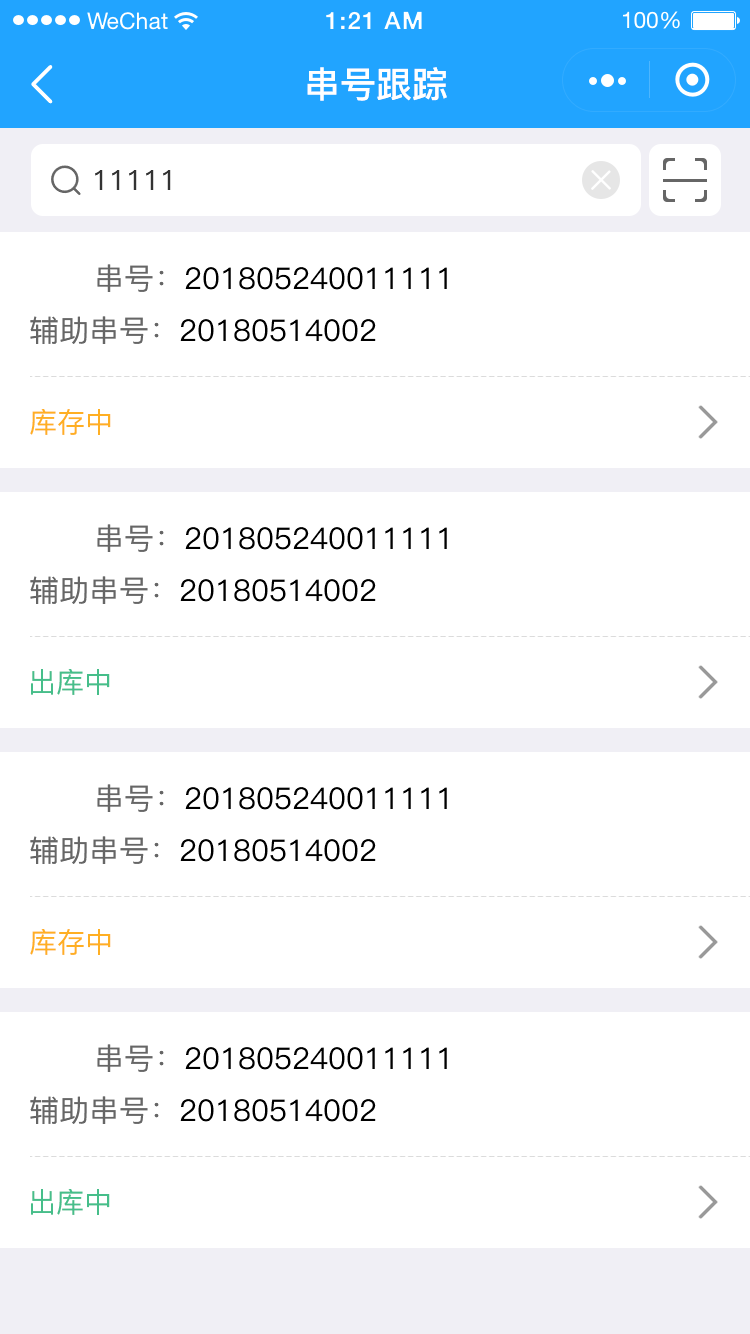
<style>
.page{position:relative;width:750px;height:1334px;background:#ffffff}
.page>*{position:absolute;margin:0}
.t1{font:36px "PingFang-SC-Bold";color:#ffffff}
.t2{font:28px "PingFang-SC-Medium";color:#333333}
.t3{font:30px "PingFang-SC-Medium";color:#000000}
.t4{font:30px "PingFang-SC-Medium";color:#666666}
.t5{font:28px "PingFang-SC-Medium";color:#ffaf23}
.t6{font:28px "PingFang-SC-Medium";color:#46be8a}
</style>
<div class="page">
<p class="t1" style="left:307px;top:67px;width:140px;height:34px">串号跟踪</p>
<p class="t2" style="left:95px;top:170px;width:76px;height:20px">11111</p>
<p class="t3" style="left:97px;top:264px;width:350px;height:28px"><span class="t4">串号：</span>201805240011111</p>
<p class="t3" style="left:30px;top:316px;width:346px;height:28px"><span class="t4">辅助串号：</span>20180514002</p>
<p class="t5" style="left:30px;top:409px;width:81px;height:26px">库存中</p>
<p class="t3" style="left:97px;top:524px;width:350px;height:28px"><span class="t4">串号：</span>201805240011111</p>
<p class="t3" style="left:30px;top:576px;width:346px;height:28px"><span class="t4">辅助串号：</span>20180514002</p>
<p class="t6" style="left:31px;top:669px;width:79px;height:26px">出库中</p>
<p class="t3" style="left:97px;top:784px;width:350px;height:28px"><span class="t4">串号：</span>201805240011111</p>
<p class="t3" style="left:30px;top:836px;width:346px;height:28px"><span class="t4">辅助串号：</span>20180514002</p>
<p class="t5" style="left:30px;top:929px;width:81px;height:26px">库存中</p>
<p class="t3" style="left:97px;top:1044px;width:350px;height:28px"><span class="t4">串号：</span>201805240011111</p>
<p class="t3" style="left:30px;top:1096px;width:346px;height:28px"><span class="t4">辅助串号：</span>20180514002</p>
<p class="t6" style="left:31px;top:1189px;width:79px;height:26px">出库中</p>
</div>
